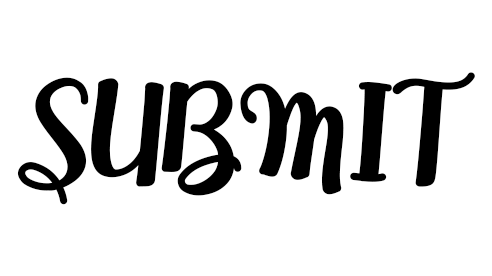
<style>
.page{position:relative;width:492px;height:276px;background:#ffffff}
.page>*{position:absolute;margin:0}
.t1{font:130.9px "SOV_Thanamas";letter-spacing:-0.025em;color:#000000;font-weight:bold}
</style>
<div class="page">
<p class="t1" style="left:17px;top:72px;width:458px;height:133px">SUBMIT</p>
<p class="t1" style="left:17px;top:72px;width:458px;height:133px">SUBMIT</p>
</div>
